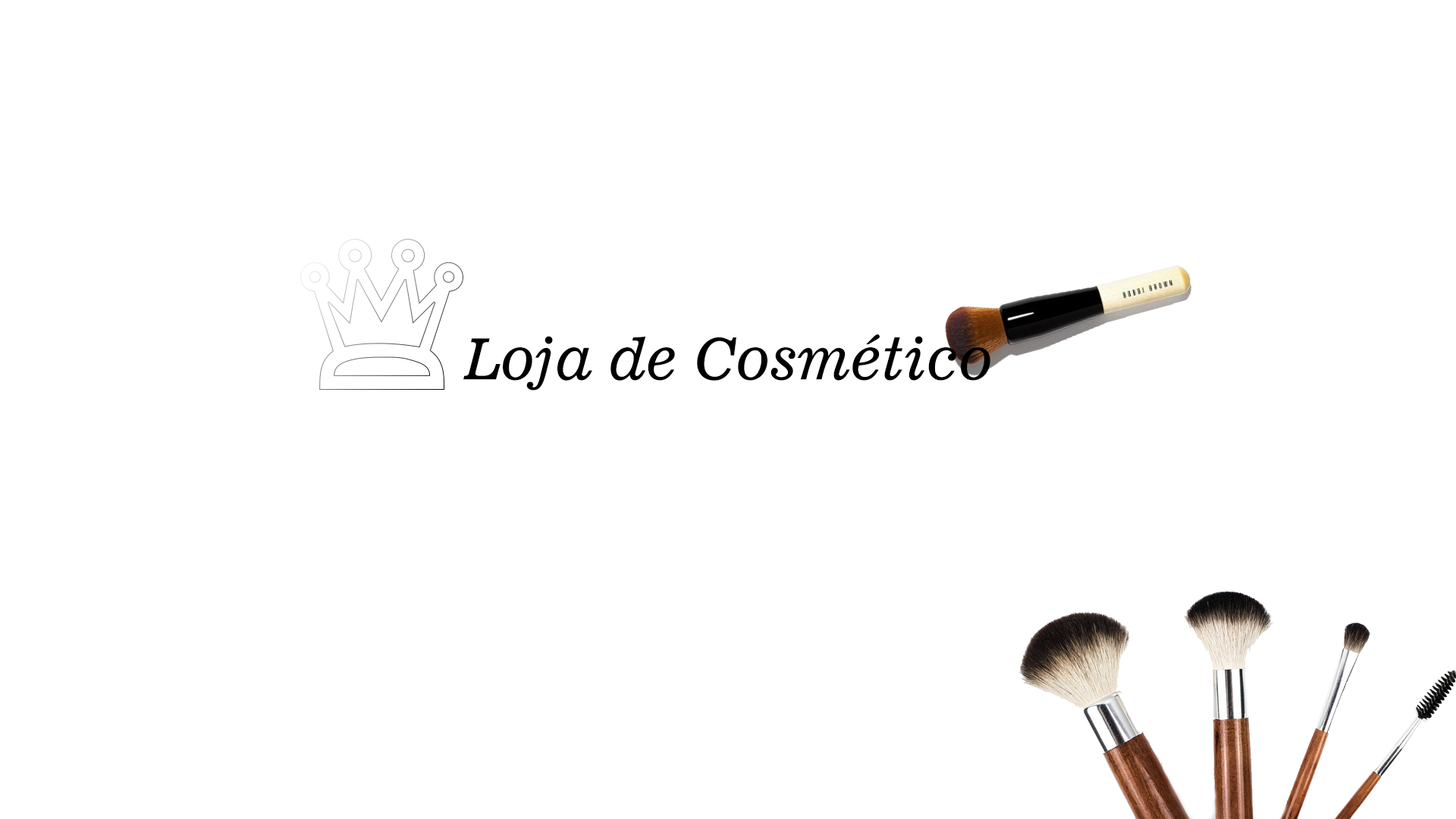
<style>
.page{position:relative;width:1456px;height:819px;background:#ffffff}
.page>*{position:absolute;margin:0}
.t1{font:56.9px "News701BT-ItalicA";color:#000000}
</style>
<div class="page">
<p class="t1" style="left:463px;top:334px;width:527px;height:57px">Loja de Cosmético</p>
</div>
